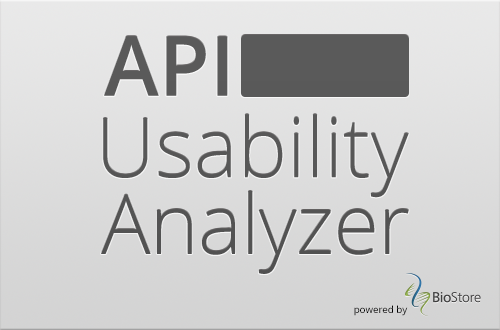
<style>
.page{position:relative;width:500px;height:330px}
.page>*{position:absolute;margin:0}
.t1{font:82.9px "OpenSans-Semibold";color:#5a5a5a}
.t2{font:82.9px "OpenSans-Light";color:#5a5a5a}
.t3{font:82.9px "OpenSans-Light";letter-spacing:-0.01em;color:#5a5a5a}
.t4{font:9.7px "OpenSans";color:#000000}
</style>
<div class="page">
<p class="t1" style="left:104px;top:36px;width:124px;height:60px">API</p>
<p class="t2" style="left:103px;top:114px;width:306px;height:84px">Usability</p>
<p class="t3" style="left:101px;top:191px;width:308px;height:83px">Analyzer</p>
<p class="t4" style="left:354px;top:305px;width:54px;height:11px">powered by</p>
</div>
